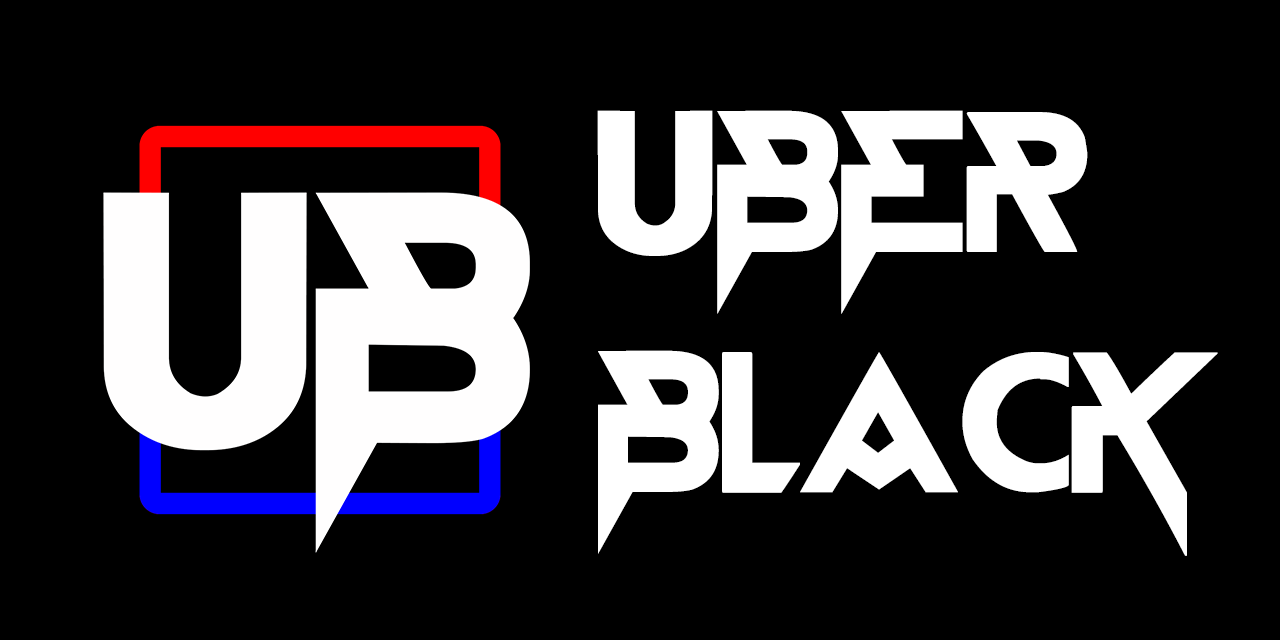
<style>
.page{position:relative;width:1280px;height:640px;background:#000000}
.page>*{position:absolute;margin:0}
.t1{font:200px "BlackStarFJNTBYLYAJKA";color:#ffffff}
</style>
<div class="page">
<p class="t1" style="left:597px;top:110px;width:621px;height:446px">UBER<br>BLACK</p>
</div>
